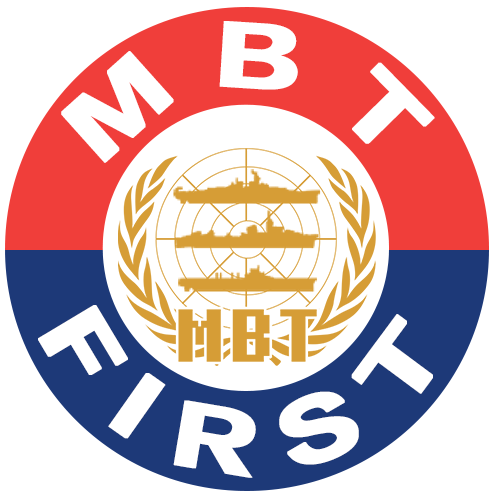
<style>
.page{position:relative;width:500px;height:500px;background:#ffffff}
.page>*{position:absolute;margin:0}
.t1{font:100px "FZLTTHBJW--GB1-0";letter-spacing:0.3em;color:#ffffff;font-weight:bold}
.t2{font:100px "FZLTTHBJW--GB1-0";letter-spacing:0.4em;color:#ffffff;font-weight:bold}
</style>
<div class="page">
<p class="t1" style="left:61px;top:21px;width:374px;height:142px">MBT</p>
<p class="t2" style="left:38px;top:305px;width:395px;height:173px;text-align:center">FIRST</p>
</div>
